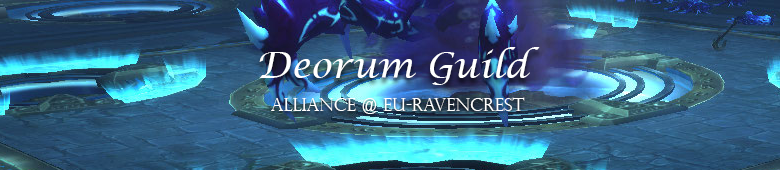
<style>
.page{position:relative;width:780px;height:170px}
.page>*{position:absolute;margin:0}
.t1{font:36px "LucidaCalligraphy-Italic";color:#ffffff}
.t2{font:18px "PerpetuaTitlingMT-Light";color:#ffffff}
</style>
<div class="page">
<p class="t1" style="left:259px;top:47px;width:281px;height:38px">Deorum Guild</p>
<p class="t2" style="left:271px;top:97px;width:254px;height:17px">Alliance @ EU-Ravencrest</p>
</div>
